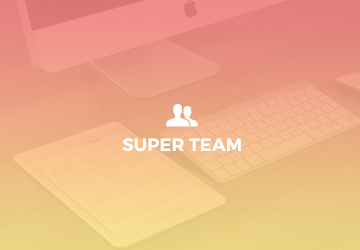
<style>
.page{position:relative;width:360px;height:250px}
.page>*{position:absolute;margin:0}
.t1{font:18px "Montserrat-Bold";color:#ffffff;text-transform:uppercase}
</style>
<div class="page">
<p class="t1" style="left:122px;top:138px;width:119px;height:14px">super team</p>
</div>
